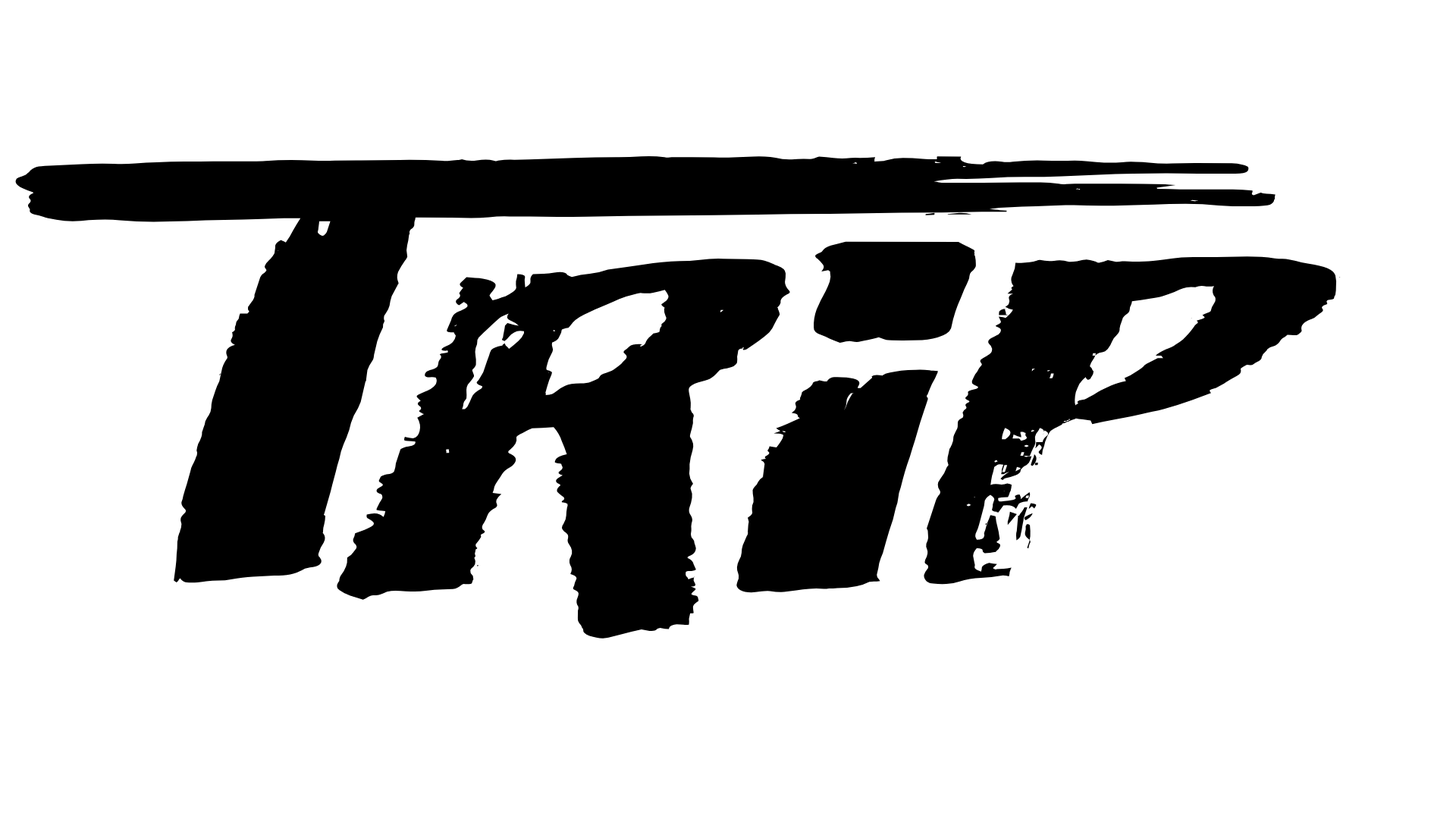
<style>
.page{position:relative;width:1456px;height:819px;background:#ffffff}
.page>*{position:absolute;margin:0}
.t1{font:430px "California-Medium";color:#000000;scale:2.13 1}
</style>
<div class="page">
<p class="t1" style="left:14px;top:155px;width:1327px;height:484px">TRIP</p>
</div>
